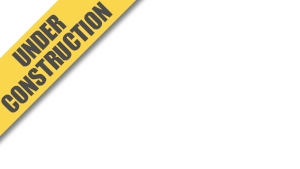
<style>
.page{position:relative;width:300px;height:169px;background:#ffffff}
.page>*{position:absolute;margin:0}
.t1{font:24px/24px "Impact";letter-spacing:-0.012em;color:#4c4c4c}
</style>
<div class="page">
<p class="t1" style="left:1px;top:1px;width:112px;height:112px;text-align:center;rotate:-45deg">UNDER<br>CONSTRUCTION</p>
</div>
